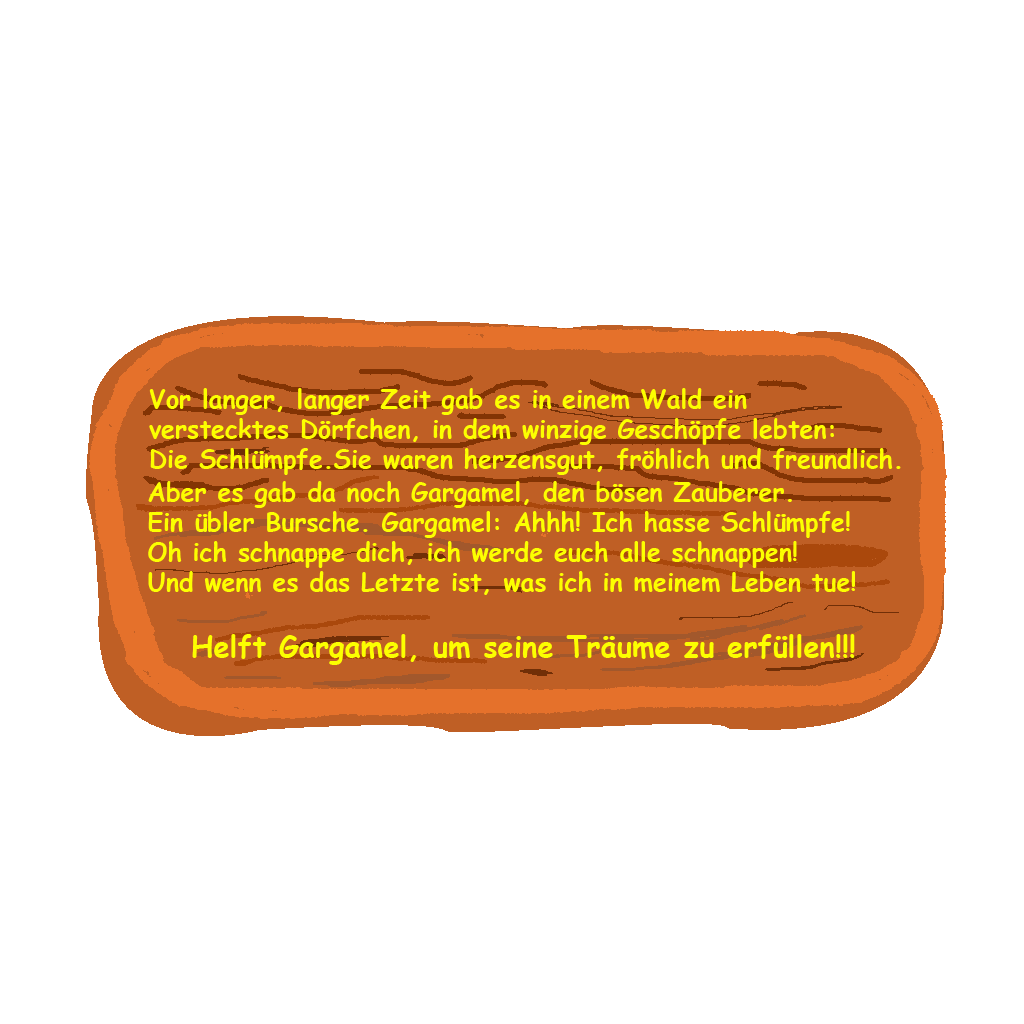
<style>
.page{position:relative;width:1024px;height:1024px;background:#ffffff}
.page>*{position:absolute;margin:0}
.t1{font:25px "ComicSansMS-Bold";color:#fcff00}
.t2{font:29.2px "ComicSansMS-Bold";color:#fcff00}
</style>
<div class="page">
<p class="t1" style="left:149px;top:388px;width:752px;height:87px;text-align:justify">Vor langer, langer Zeit gab es in einem Wald ein <br>verstecktes Dörfchen, in dem winzige Geschöpfe lebten:<br>Die Schlümpfe.Sie waren herzensgut, fröhlich und freundlich.</p>
<p class="t1" style="left:148px;top:481px;width:707px;height:114px;text-align:justify">Aber es gab da noch Gargamel, den bösen Zauberer. <br>Ein übler Bursche. Gargamel: Ahhh! Ich hasse Schlümpfe! <br>Oh ich schnappe dich, ich werde euch alle schnappen!<br>Und wenn es das Letzte ist, was ich in meinem Leben tue!</p>
<p class="t2" style="left:192px;top:634px;width:663px;height:31px">Helft Gargamel, um seine Träume zu erfüllen!!!</p>
</div>
